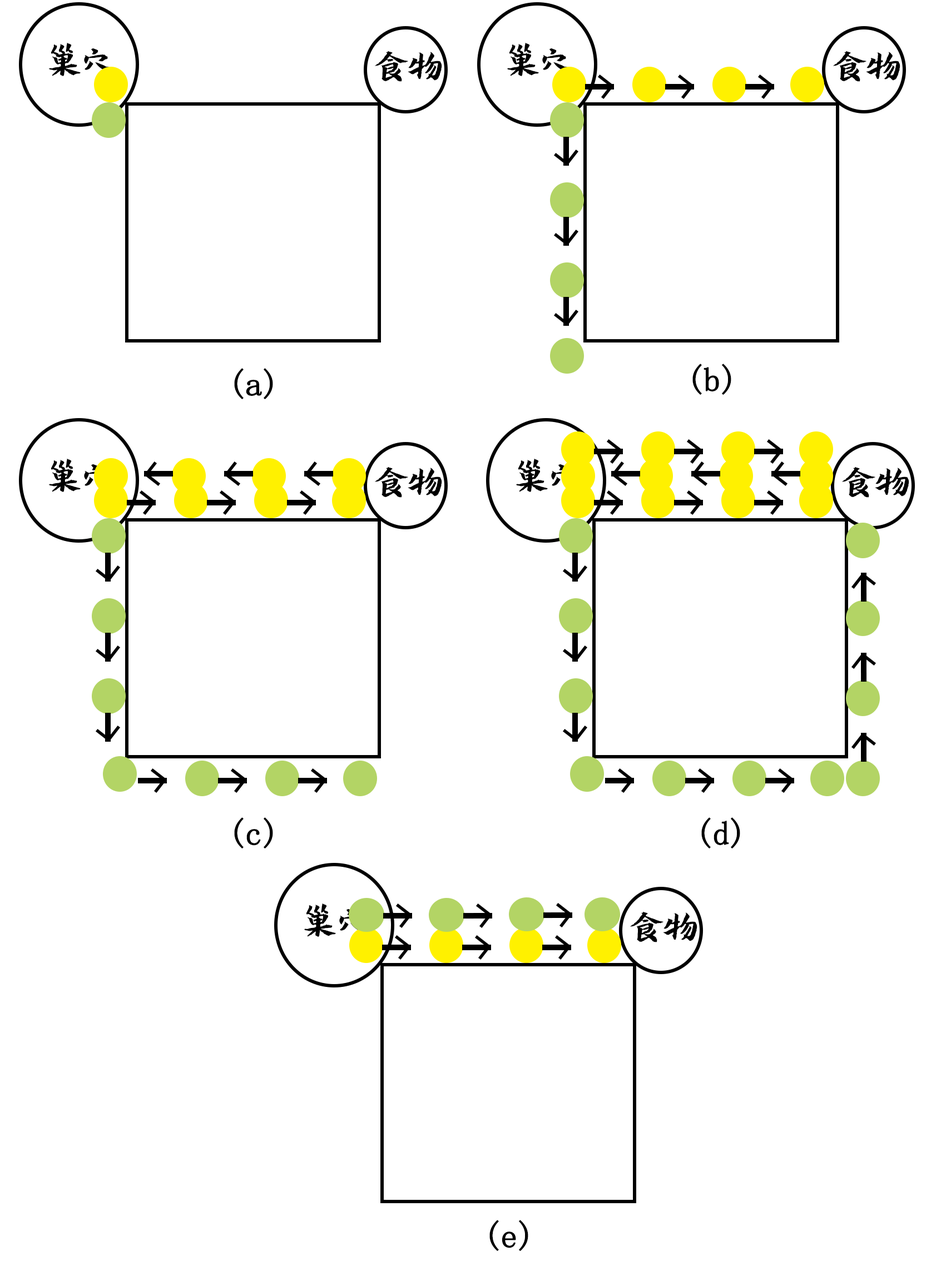
<style>
.page{position:relative;width:946px;height:1261px;background:#ffffff}
.page>*{position:absolute;margin:0}
.t1{font:33.4px "JIMOJW";color:#000000}
.t2{font:33.4px "SimSun";color:#000000;font-weight:bold}
</style>
<div class="page">
<p class="t1" style="left:48px;top:43px;width:64px;height:33px">巢穴</p>
<p class="t1" style="left:375px;top:51px;width:67px;height:31px">食物</p>
<p class="t1" style="left:506px;top:43px;width:64px;height:33px">巢穴</p>
<p class="t1" style="left:833px;top:51px;width:67px;height:31px">食物</p>
<p class="t2" style="left:692px;top:364px;width:39px;height:31px">(b)</p>
<p class="t2" style="left:234px;top:368px;width:39px;height:31px">(a)</p>
<p class="t1" style="left:48px;top:459px;width:64px;height:33px">巢穴</p>
<p class="t1" style="left:515px;top:459px;width:64px;height:33px">巢穴</p>
<p class="t1" style="left:375px;top:466px;width:67px;height:32px">食物</p>
<p class="t1" style="left:842px;top:466px;width:67px;height:32px">食物</p>
<p class="t2" style="left:234px;top:817px;width:39px;height:31px">(c)</p>
<p class="t2" style="left:701px;top:817px;width:39px;height:31px">(d)</p>
<p class="t1" style="left:304px;top:903px;width:63px;height:34px">巢穴</p>
<p class="t1" style="left:630px;top:911px;width:67px;height:31px">食物</p>
<p class="t2" style="left:489px;top:1220px;width:39px;height:31px">(e)</p>
</div>
